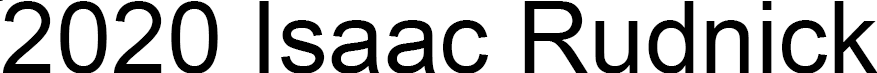
<style>
.page{position:relative;width:877px;height:73px;background:#ffffff}
.page>*{position:absolute;margin:0}
.t1{font:100px "ArialMT";color:#000000}
</style>
<div class="page">
<p class="t1" style="left:3px;top:1px;width:875px;height:73px">2020 Isaac Rudnick</p>
</div>
